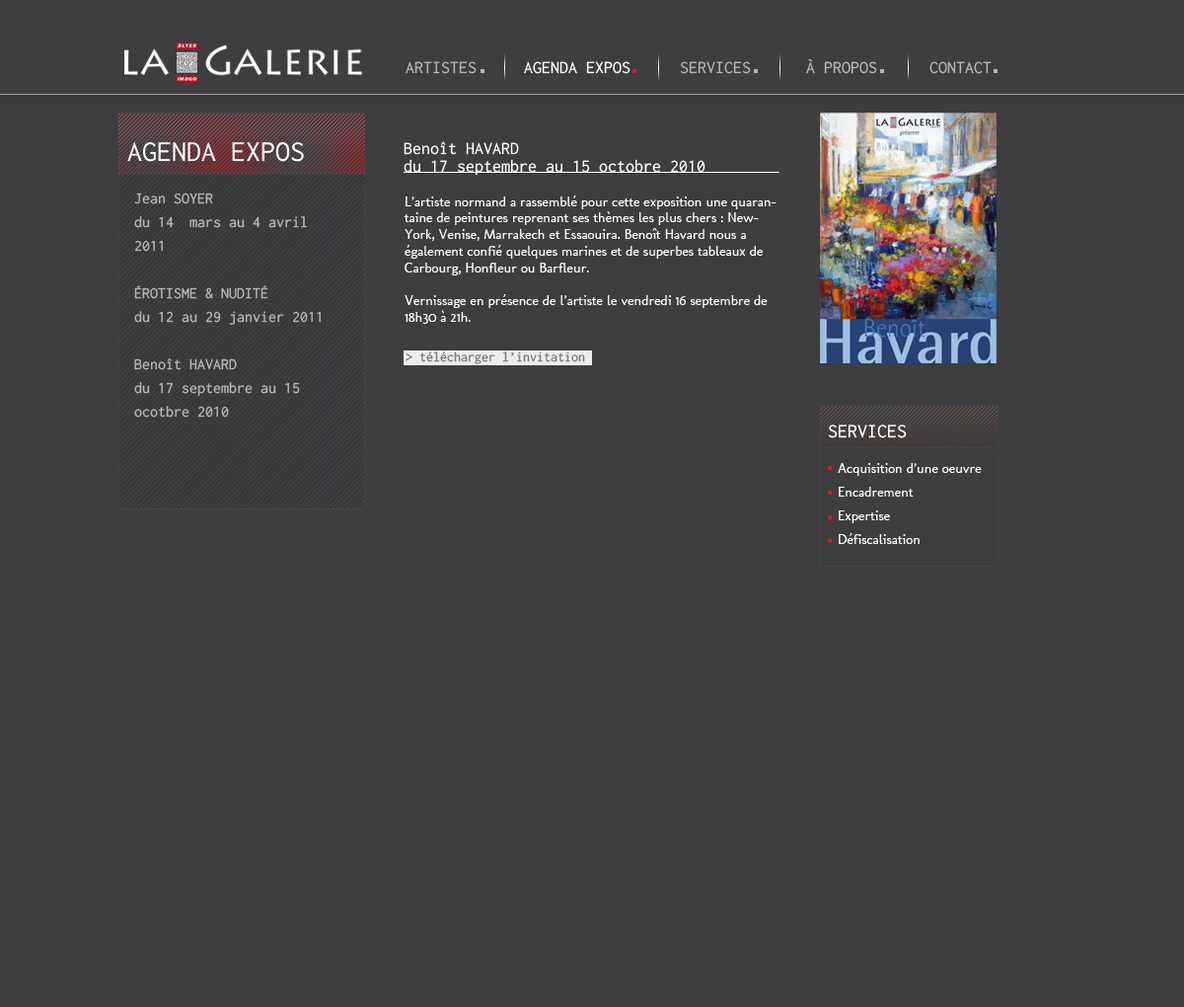
<style>
.page{position:relative;width:1184px;height:1007px;background:#3e3d40}
.page>*{position:absolute;margin:0}
.t1{font:17.8px "Inconsolata";color:#b5b5b5}
.t2{font:17.8px "Inconsolata";color:#ffffff}
.t3{font:29.6px "Inconsolata";color:#ffffff}
.t4{font:17.8px/17.8px "Inconsolata";color:#ffffff}
.t5{font:15.8px/23.7px "Inconsolata";color:#b5b5b5}
.t6{font:13.8px "Molengo";color:#ffffff}
.t7{font:13.8px "Inconsolata";color:#7c7c7c}
.t8{font:19.7px "Inconsolata";color:#ffffff}
.t9{font:13.8px/23.7px "Molengo";color:#ffffff}
</style>
<div class="page">
<p class="t1" style="left:406px;top:61px;width:71px;height:13px">ARTISTES</p>
<p class="t2" style="left:524px;top:61px;width:107px;height:13px">AGENDA EXPOS</p>
<p class="t1" style="left:680px;top:61px;width:71px;height:13px">SERVICES</p>
<p class="t1" style="left:806px;top:58px;width:71px;height:16px">À PROPOS</p>
<p class="t1" style="left:930px;top:61px;width:62px;height:13px">CONTACT</p>
<p class="t3" style="left:127px;top:142px;width:177px;height:20px">AGENDA EXPOS</p>
<p class="t4" style="left:404px;top:141px;width:302px;height:35px">Benoît HAVARD<br>du 17 septembre au 15 octobre 2010</p>
<p class="t5" style="left:134px;top:192px;width:187px;height:226px">Jean SOYER<br>du 14  mars au 4 avril 2011<br><br>ÉROTISME &amp; NUDITÉ<br>du 12 au 29 janvier 2011<br><br>Benoît HAVARD<br>du 17 septembre au 15 ocotbre 2010</p>
<p class="t6" style="left:404px;top:195px;width:373px;height:129px">L’artiste normand a rassemblé pour cette exposition une quarantaine de peintures reprenant ses thèmes les plus chers : New-York, Venise, Marrakech et Essaouira. Benoît Havard nous a également confié quelques marines et de superbes tableaux de Carbourg, Honfleur ou Barfleur.<br><br>Vernissage en présence de l’artiste le vendredi 16 septembre de 18h30 à 21h.</p>
<p class="t7" style="left:406px;top:351px;width:179px;height:13px">&gt; télécharger l’invitation</p>
<p class="t8" style="left:829px;top:424px;width:78px;height:14px">SERVICES</p>
<p class="t9" style="left:838px;top:463px;width:144px;height:81px">Acquisition d’une oeuvre<br>Encadrement<br>Expertise<br>Défiscalisation</p>
</div>
